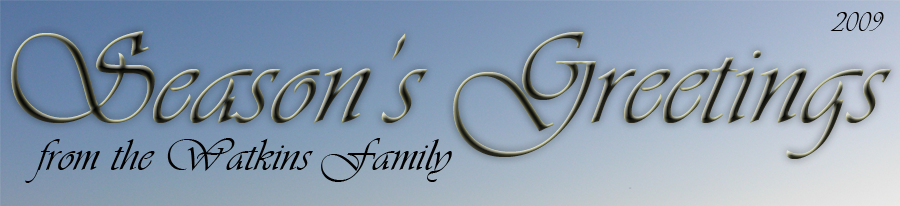
<style>
.page{position:relative;width:900px;height:206px}
.page>*{position:absolute;margin:0}
.t1{font:28.9px "Vivaldii";color:#000000}
.t2{font:132.1px "Vivaldii"}
.t3{font:46.9px "Vivaldii";color:#000000}
</style>
<div class="page">
<p class="t1" style="left:830px;top:12px;width:54px;height:19px">2009</p>
<p class="t2" style="left:11px;top:31px;width:881px;height:128px">Season’s Greetings</p>
<p class="t3" style="left:25px;top:138px;width:427px;height:45px">from the Watkins Family</p>
</div>
